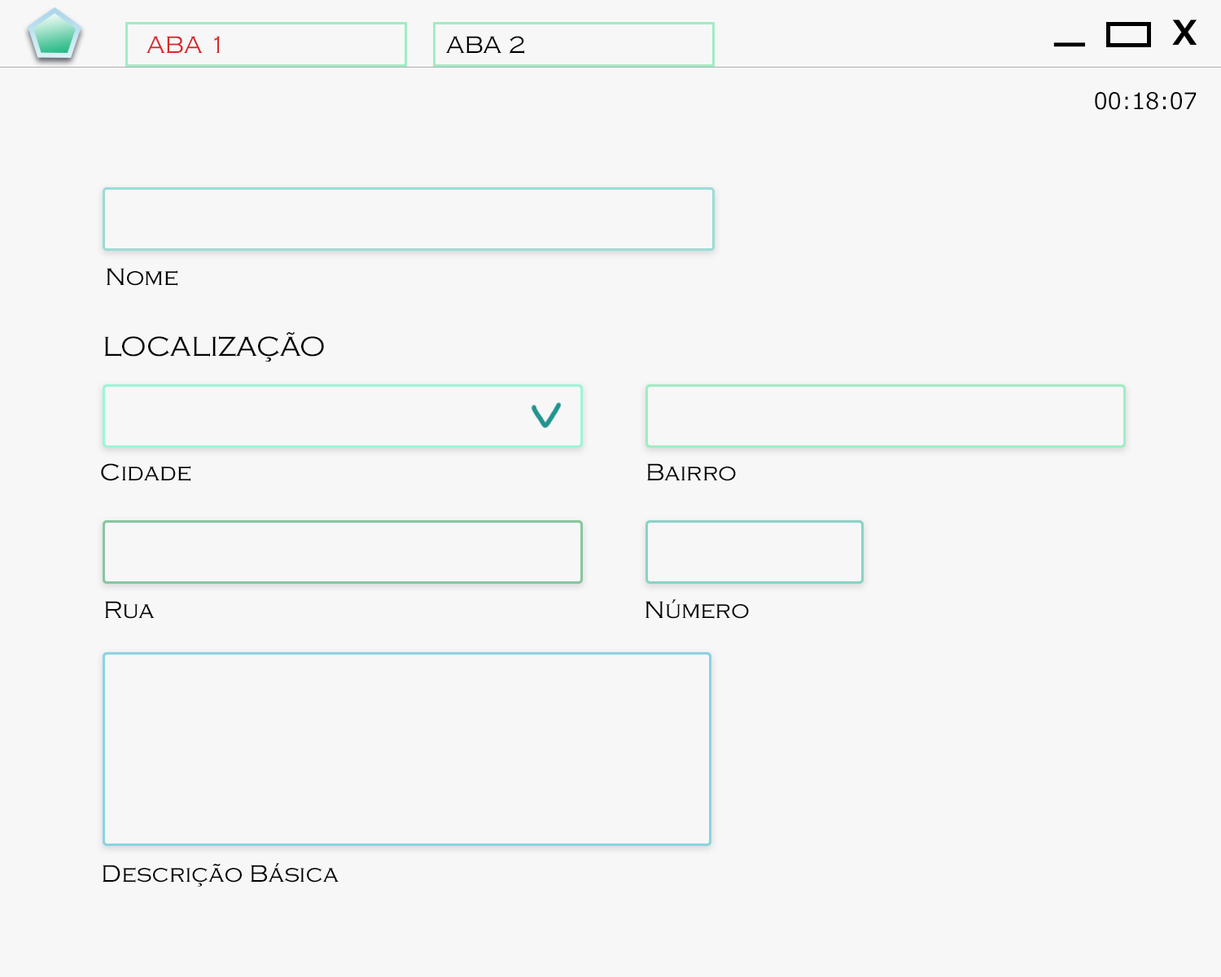
<style>
.page{position:relative;width:1221px;height:977px;background:#f7f7f8}
.page>*{position:absolute;margin:0}
.t1{font:33.9px "Meiryo-Bold";color:#000000}
.t2{font:24.9px "CopperplateGothic-Light";color:#d82929}
.t3{font:24.9px "CopperplateGothic-Light";color:#000000}
.t4{font:45.2px "Meiryo-Bold";color:#000000}
.t5{font:22.6px "Meiryo";color:#000000}
.t6{font:28.3px "CopperplateGothic-Light";color:#000000}
</style>
<div class="page">
<p class="t1" style="left:1172px;top:20px;width:25px;height:25px">X</p>
<p class="t2" style="left:147px;top:36px;width:73px;height:17px">ABA 1</p>
<p class="t3" style="left:446px;top:36px;width:78px;height:18px">ABA 2</p>
<p class="t4" style="left:1053px;top:42px;width:32px;height:5px">_</p>
<p class="t5" style="left:1095px;top:92px;width:101px;height:18px">00:18:07</p>
<p class="t3" style="left:107px;top:268px;width:70px;height:18px">Nome</p>
<p class="t6" style="left:104px;top:331px;width:220px;height:31px">LOCALIZAÇÃO</p>
<p class="t3" style="left:101px;top:463px;width:89px;height:18px">Cidade</p>
<p class="t3" style="left:647px;top:463px;width:89px;height:18px">Bairro</p>
<p class="t3" style="left:105px;top:601px;width:50px;height:18px">Rua</p>
<p class="t3" style="left:645px;top:599px;width:104px;height:20px">Número</p>
<p class="t3" style="left:103px;top:863px;width:236px;height:23px">Descrição Básica</p>
</div>
